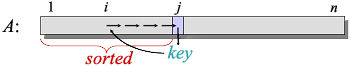
<style>
.page{position:relative;width:351px;height:66px;background:#ffffff}
.page>*{position:absolute;margin:0}
.t1{font:14.7px "TimesNewRomanPSMT";color:#000000}
.t2{font:14.7px "TimesNewRomanPS-ItalicMT";color:#000000}
.t3{font:18.7px "TimesNewRomanPS-ItalicMT";color:#000000}
.t4{font:18.7px "TimesNewRomanPSMT";color:#000000}
.t5{font:18.7px "TimesNewRomanPS-ItalicMT";color:#cd0000}
.t6{font:18.7px "TimesNewRomanPS-ItalicMT";color:#27a1aa}
</style>
<div class="page">
<p class="t1" style="left:49px;top:1px;width:4px;height:11px">1</p>
<p class="t2" style="left:104px;top:2px;width:4px;height:10px">i</p>
<p class="t2" style="left:174px;top:2px;width:8px;height:13px">j</p>
<p class="t2" style="left:330px;top:5px;width:8px;height:8px">n</p>
<p class="t3" style="left:2px;top:19px;width:17px;height:14px">A<span class="t4">:</span></p>
<p class="t5" style="left:85px;top:51px;width:49px;height:14px">sorted</p>
<p class="t6" style="left:167px;top:45px;width:26px;height:18px">key</p>
</div>
